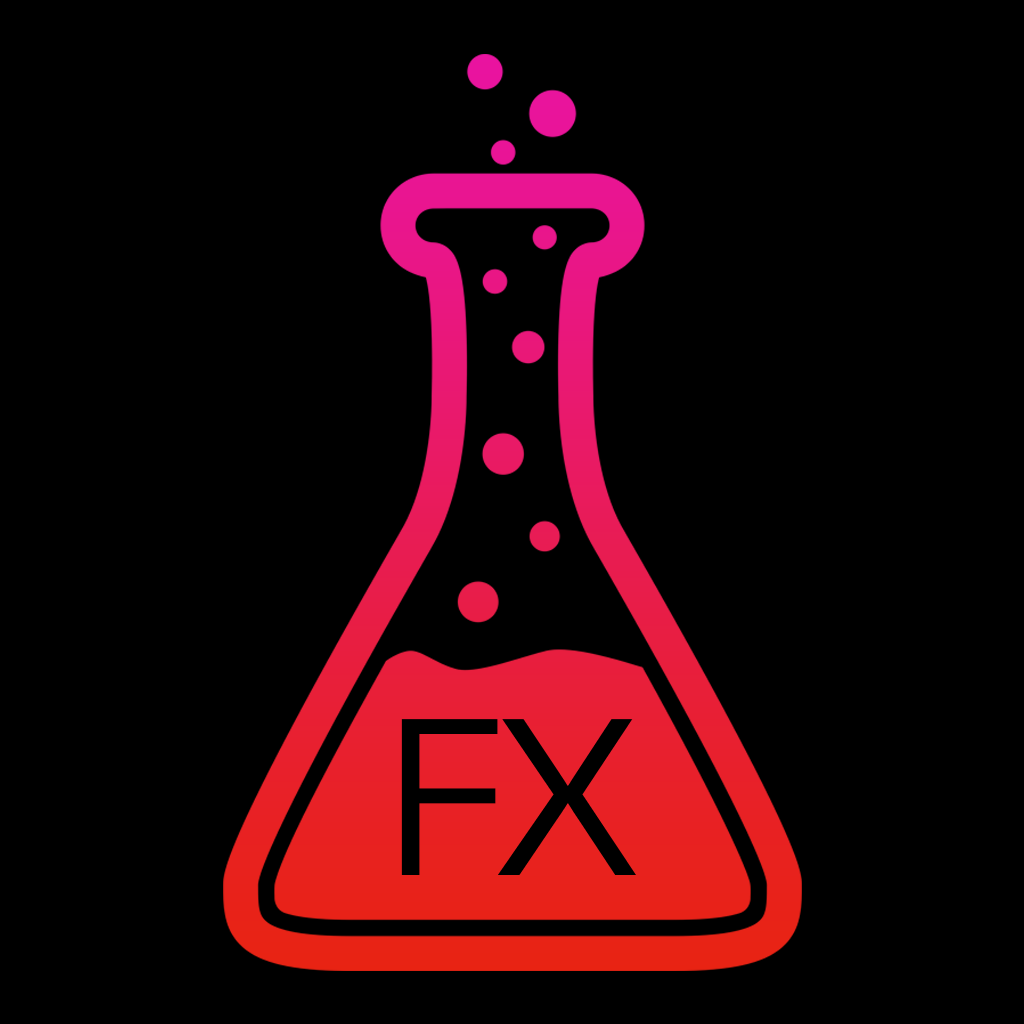
<style>
.page{position:relative;width:1024px;height:1024px;background:#000000}
.page>*{position:absolute;margin:0}
.t1{font:233.8px "EurostileRegular";letter-spacing:-0.01em;color:#000000}
</style>
<div class="page">
<p class="t1" style="left:401px;top:719px;width:235px;height:156px">FX</p>
</div>
